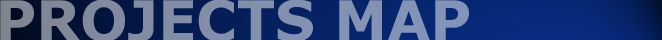
<style>
.page{position:relative;width:662px;height:40px}
.page>*{position:absolute;margin:0}
.t1{font:56px "Verdana-Bold";letter-spacing:-0.005em;color:#828eab}
</style>
<div class="page">
<p class="t1" style="left:0px;top:0px;width:469px;height:42px">PROJECTS MAP</p>
</div>
